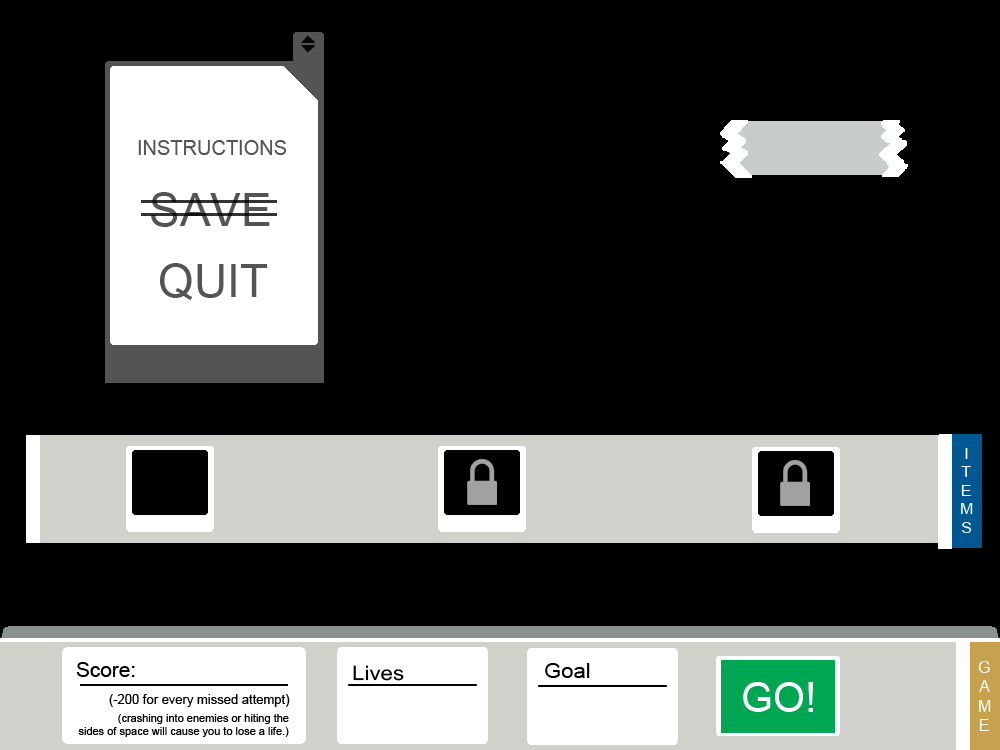
<style>
.page{position:relative;width:1000px;height:750px;background:#000000}
.page>*{position:absolute;margin:0}
.t1{font:20px "ArialMT";color:#545454}
.t2{font:46px "ArialMT";color:#545454}
.t3{font:15.4px "ArialMT";color:#ffffff;scale:1.03 1}
.t4{font:20px "ArialMT";color:#000000;scale:1.04 1}
.t5{font:20px "ArialMT";color:#000000;scale:1.12 1}
.t6{font:20px "ArialMT";color:#000000;scale:1.1 1}
.t7{font:16.3px "ArialMT";color:#ffffff}
.t8{font:41px "ArialMT";color:#ffffff}
.t9{font:13px "ArialMT";color:#000000}
.t10{font:11px "ArialMT";color:#000000}
</style>
<div class="page">
<p class="t1" style="left:138px;top:140px;width:149px;height:15px">INSTRUCTIONS</p>
<p class="t2" style="left:151px;top:192px;width:119px;height:35px">SAVE</p>
<p class="t2" style="left:160px;top:263px;width:108px;height:37px">QUIT</p>
<p class="t3" style="left:961px;top:448px;width:12px;height:85px">I<br>T<br>E<br>M<br>S</p>
<p class="t4" style="left:76px;top:662px;width:59px;height:15px">Score:</p>
<p class="t5" style="left:353px;top:665px;width:51px;height:16px">Lives</p>
<p class="t6" style="left:545px;top:663px;width:45px;height:15px">Goal</p>
<p class="t7" style="left:978px;top:661px;width:13px;height:70px">G<br>A<br>M<br>E</p>
<p class="t8" style="left:743px;top:682px;width:70px;height:30px">GO!</p>
<p class="t9" style="left:109px;top:694px;width:181px;height:13px">(-200 for every missed attempt)</p>
<p class="t10" style="left:78px;top:714px;width:211px;height:23px">(crashing into enemies or hiting the <br>sides of space will cause you to lose a life.)</p>
</div>
